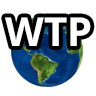
<style>
.page{position:relative;width:96px;height:96px;background:#ffffff}
.page>*{position:absolute;margin:0}
.t1{font:40px "OpenSans-Bold";color:#ffffff}
</style>
<div class="page">
<p class="t1" style="left:5px;top:17px;width:86px;height:29px">WTP</p>
</div>
